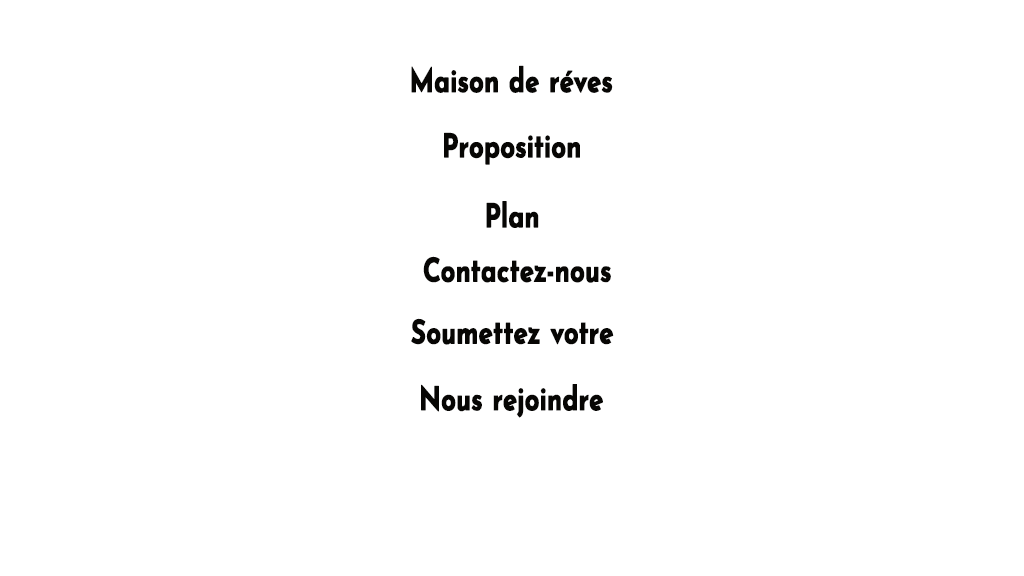
<style>
.page{position:relative;width:1024px;height:576px;background:#ffffff}
.page>*{position:absolute;margin:0}
.t1{font:32.5px "JosefinSans-Bold";color:#070604;font-weight:bold;scale:0.79 1}
</style>
<div class="page">
<p class="t1" style="left:411px;top:65px;width:202px;height:28px">Maison de réves</p>
<p class="t1" style="left:444px;top:132px;width:136px;height:33px">Proposition</p>
<p class="t1" style="left:486px;top:201px;width:53px;height:27px">Plan</p>
<p class="t1" style="left:423px;top:256px;width:188px;height:27px">Contactez-nous</p>
<p class="t1" style="left:411px;top:318px;width:203px;height:27px">Soumettez votre</p>
<p class="t1" style="left:421px;top:384px;width:182px;height:34px">Nous rejoindre</p>
</div>
